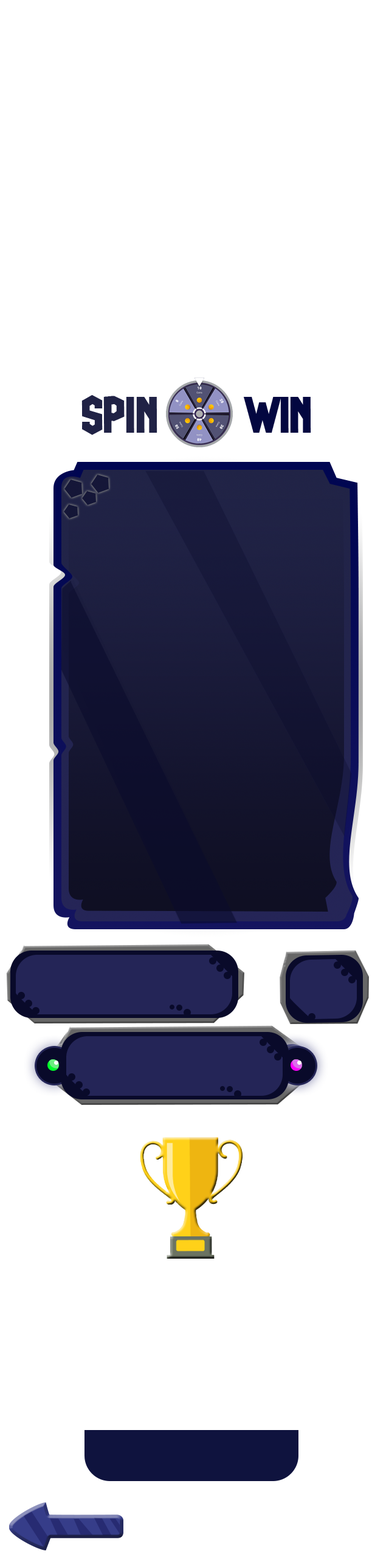
<style>
.page{position:relative;width:372px;height:1568px;background:#ffffff}
.page>*{position:absolute;margin:0}
.t1{font:50.8px "GlueGun";color:#202245}
.t2{font:50.8px "GlueGun";color:#ffffff}
.t3{font:50.8px "GlueGun";color:#030740}
</style>
<div class="page">
<p class="t1" style="left:81px;top:395px;width:230px;height:40px">SPIN<span class="t2"> AND </span><span class="t3">WIN</span></p>
</div>
